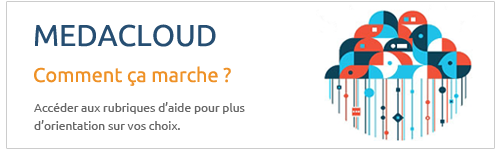
<style>
.page{position:relative;width:500px;height:150px;background:#ffffff}
.page>*{position:absolute;margin:0}
.t1{font:20px/18px "Ubuntu";color:#ee9126}
.t2{font:30px/18px "Ubuntu";color:#264e72}
.t3{font:12px/18px "Ubuntu";color:#666666}
</style>
<div class="page">
<p class="t1" style="left:34px;top:24px;width:197px;height:62px"><span class="t2">MEDACLOUD<br><br></span>Comment ça marche ?</p>
<p class="t3" style="left:34px;top:102px;width:211px;height:28px">Accéder aux rubriques d’aide pour plus d’orientation sur vos choix.</p>
</div>
